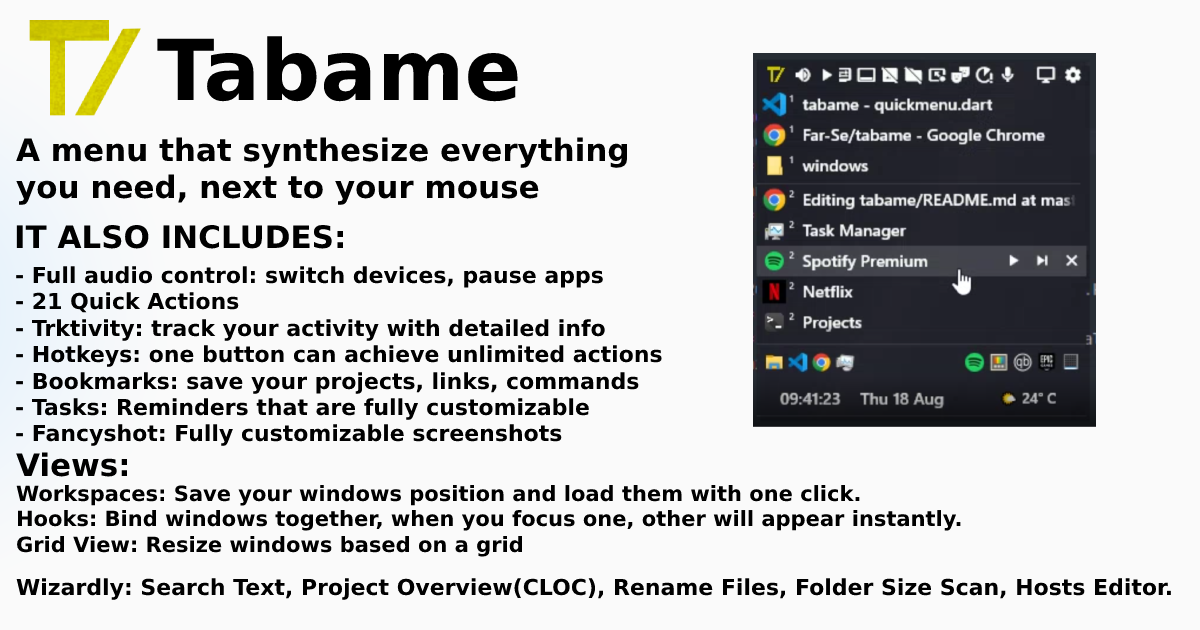
<style>
.page{position:relative;width:1200px;height:630px;background:#fafafa}
.page>*{position:absolute;margin:0}
.t1{font:84px "DejaVuSans-Bold";color:#000000}
.t2{font:31px "DejaVuSans-Bold";color:#000000}
.t3{font:22px "DejaVuSans-Bold";color:#000000}
.t4{font:21px "DejaVuSans-Bold";color:#000000}
</style>
<div class="page">
<p class="t1" style="left:157px;top:36px;width:361px;height:66px">Tabame</p>
<p class="t2" style="left:16px;top:137px;width:611px;height:68px">A menu that synthesize everything you need, next to your mouse</p>
<p class="t2" style="left:16px;top:224px;width:327px;height:25px">IT ALSO INCLUDES:</p>
<p class="t3" style="left:16px;top:266px;width:646px;height:180px">- Full audio control: switch devices, pause apps<br>- 21 Quick Actions <br>- Trktivity: track your activity with detailed info<br>- Hotkeys: one button can achieve unlimited actions<br>- Bookmarks: save your projects, links, commands<br>- Tasks: Reminders that are fully customizable<br>- Fancyshot: Fully customizable screenshots</p>
<p class="t4" style="left:16px;top:452px;width:945px;height:105px"><span class="t2">Views:<br></span>Workspaces: Save your windows position and load them with one click.<br>Hooks: Bind windows together, when you focus one, other will appear instantly.<br>Grid View: Resize windows based on a grid</p>
<p class="t3" style="left:16px;top:578px;width:1155px;height:22px">Wizardly: Search Text, Project Overview(CLOC), Rename Files, Folder Size Scan, Hosts Editor.</p>
</div>
